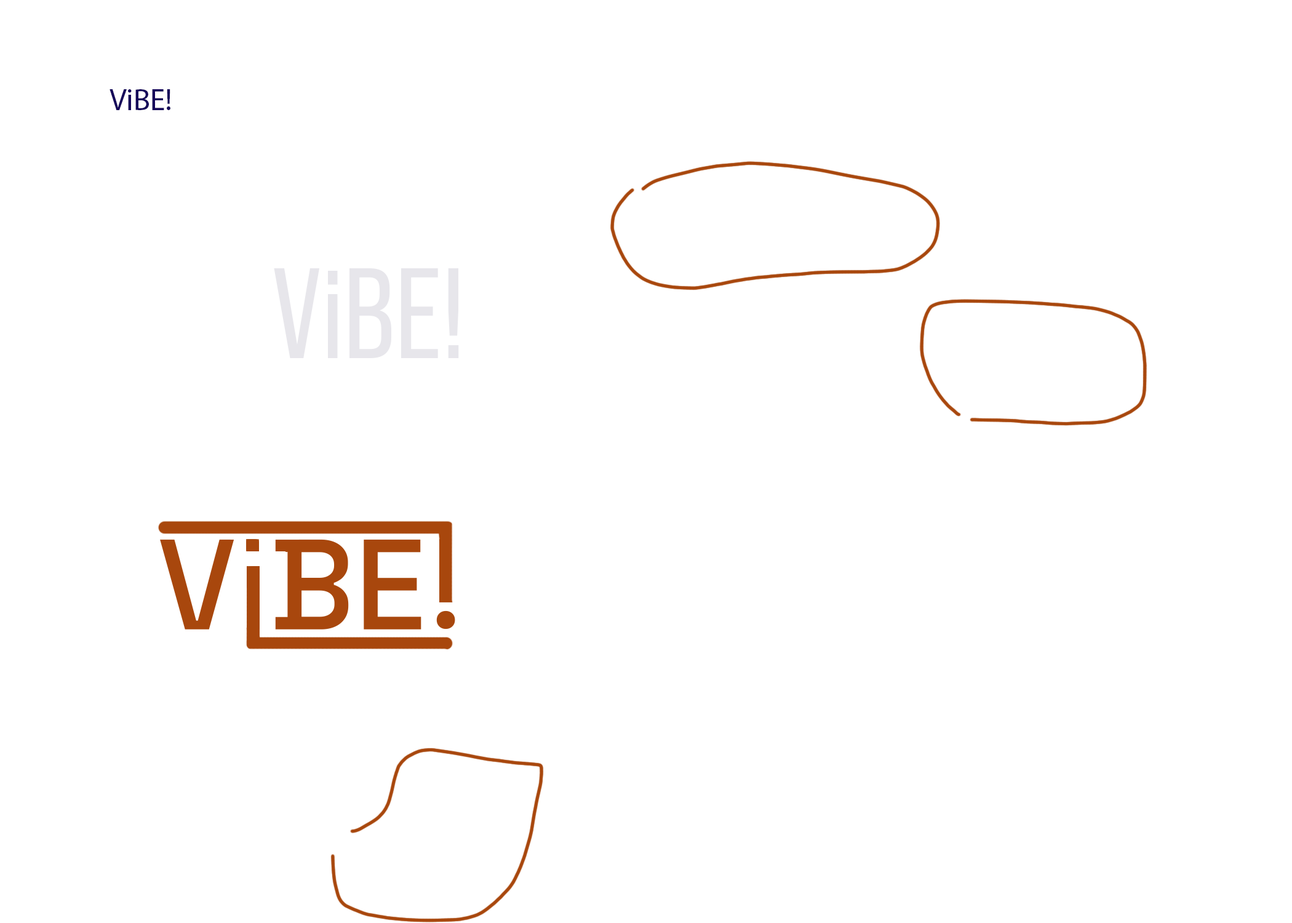
<style>
.page{position:relative;width:1292px;height:923px;background:#ffffff}
.page>*{position:absolute;margin:0}
.t1{font:30.8px "MyriadPro-Regular";color:#15045a}
.t2{font:128.1px "BebasNeuePro-Regular";color:#e7e6eb}
</style>
<div class="page">
<p class="t1" style="left:110px;top:89px;width:60px;height:21px">ViBE!</p>
<p class="t2" style="left:274px;top:268px;width:185px;height:90px">ViBE!</p>
</div>
